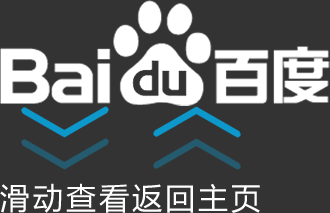
<style>
.page{position:relative;width:330px;height:213px;background:#333333}
.page>*{position:absolute;margin:0}
.t1{font:30px "MicrosoftYaHei";letter-spacing:0.1em;color:#ffffff}
</style>
<div class="page">
<p class="t1" style="left:0px;top:183px;width:129px;height:30px">滑动查看</p>
<p class="t1" style="left:132px;top:183px;width:128px;height:30px">返回主页</p>
</div>
